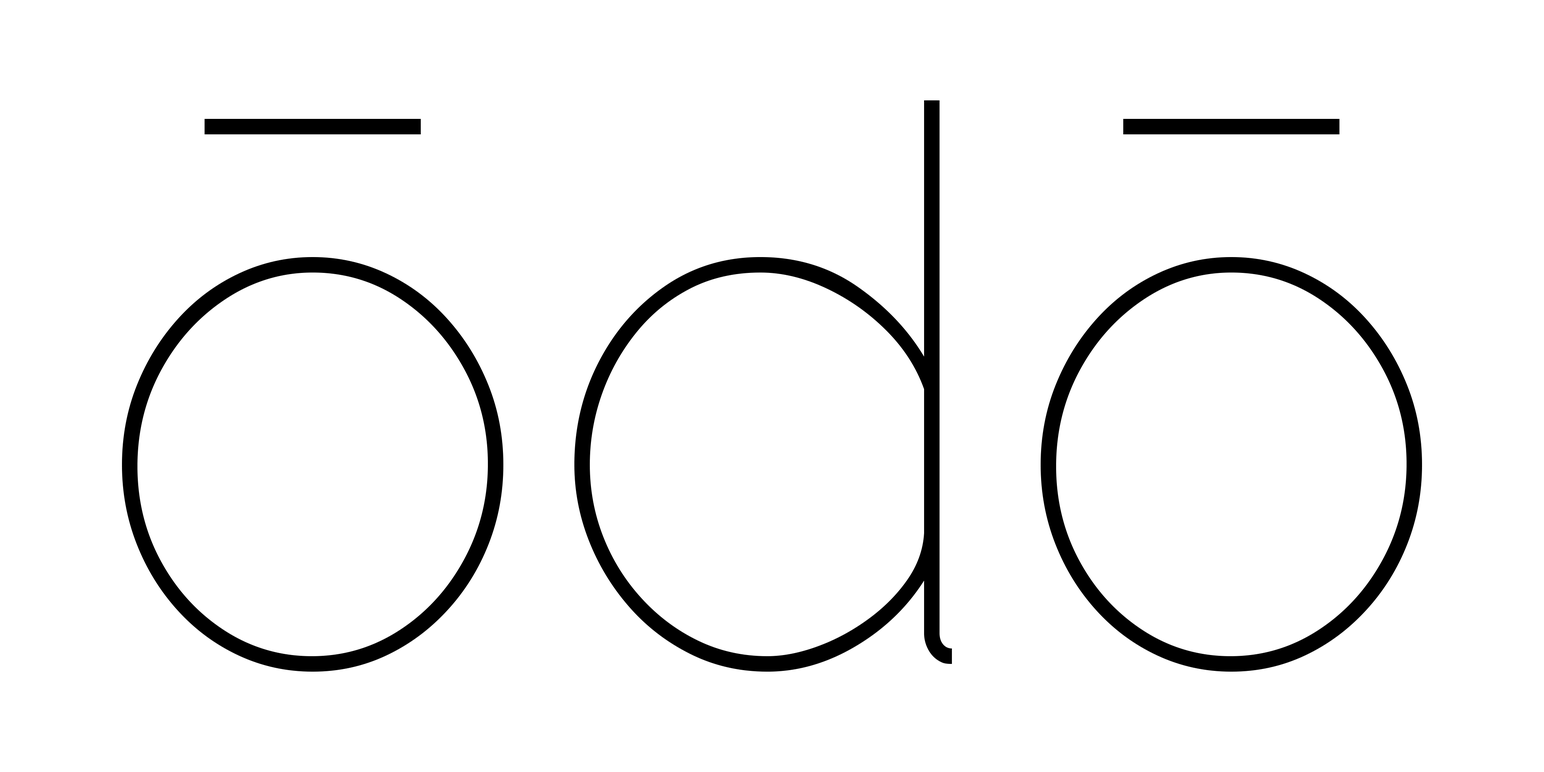
<style>
.page{position:relative;width:1544px;height:772px;background:#ffffff}
.page>*{position:absolute;margin:0}
.t1{font:772.2px "Raleway-Thin";color:#000000}
</style>
<div class="page">
<p class="t1" style="left:122px;top:100px;width:1300px;height:572px">ōdō</p>
</div>
